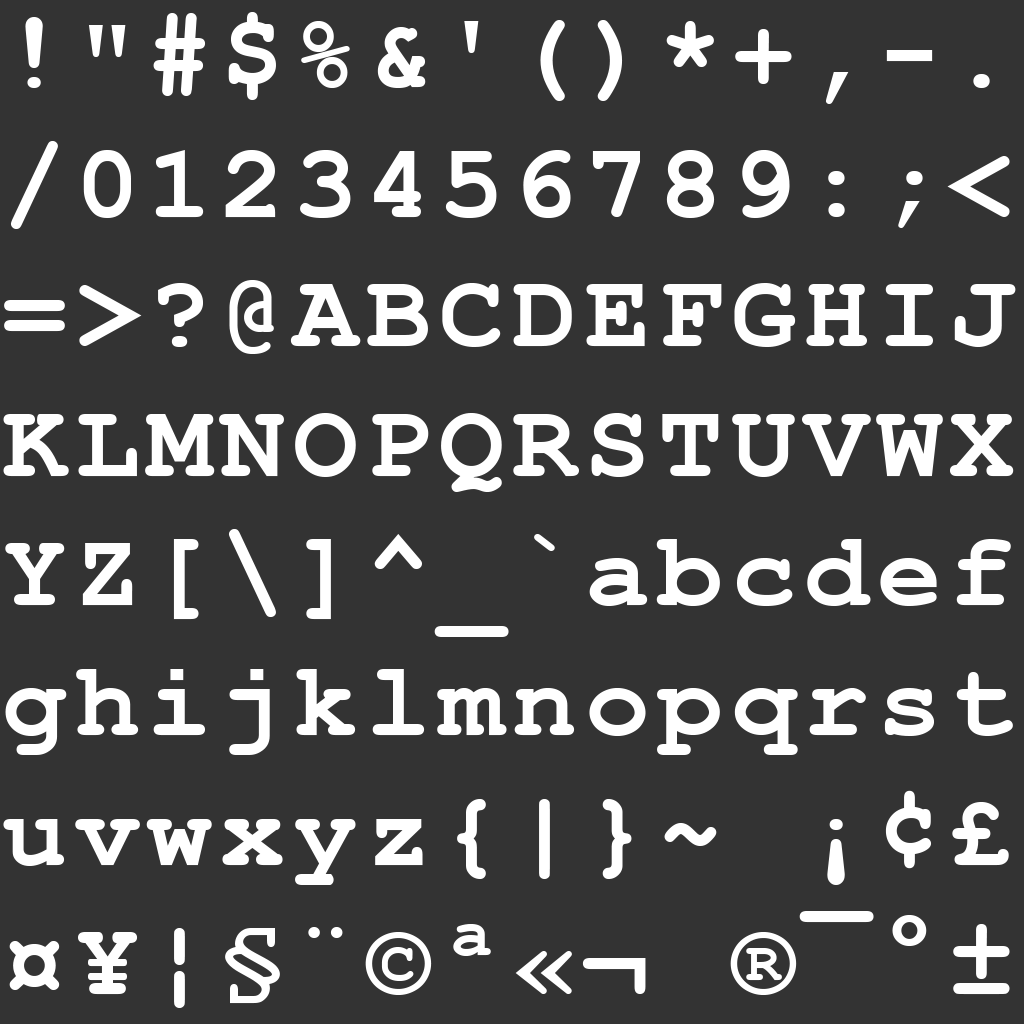
<style>
.page{position:relative;width:1024px;height:1024px;background:#333333}
.page>*{position:absolute;margin:0}
.t1{font:108px "CourierNewPS-BoldMT";letter-spacing:0.075em;color:#ffffff}
</style>
<div class="page">
<p class="t1" style="left:3px;top:12px;width:1013px;height:996px">!"#$%&amp;'()*+,-.<br>/0123456789:;&lt;<br>=&gt;?@ABCDEFGHIJ<br>KLMNOPQRSTUVWX<br>YZ[\]^_`abcdef<br>ghijklmnopqrst<br>uvwxyz{|}~ ¡¢£<br>¤¥¦§¨©ª«¬ ®¯°±</p>
</div>
